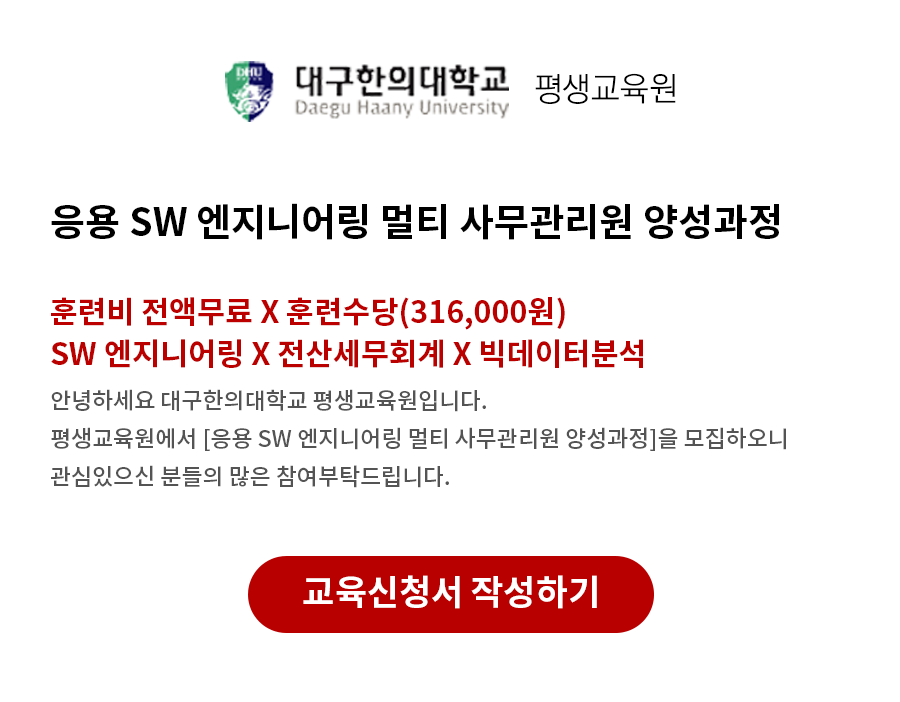
<style>
.page{position:relative;width:900px;height:702px;background:#ffffff}
.page>*{position:absolute;margin:0}
.t1{font:32.9px "KoPubWorldDotumPL";color:#000000}
.t2{font:38.1px "NotoSansCJKkr-Bold";color:#000000}
.t3{font:30.5px "NotoSansCJKkr-Bold";color:#bc0000}
.t4{font:30.5px "NotoSansCJKkr-Bold";color:#bb0000}
.t5{font:22.9px/38.1px "NotoSansCJKkr-Medium";color:#545454}
.t6{font:35px "NotoSansCJKkr-Bold";color:#ffffff}
</style>
<div class="page">
<p class="t1" style="left:535px;top:73px;width:141px;height:31px">평생교육원</p>
<p class="t2" style="left:51px;top:203px;width:728px;height:37px">응용 SW 엔지니어링 멀티 사무관리원 양성과정</p>
<p class="t3" style="left:51px;top:297px;width:514px;height:33px">훈련비 전액무료 X 훈련수당(316,000원)</p>
<p class="t4" style="left:51px;top:339px;width:592px;height:29px">SW 엔지니어링 X 전산세무회계 X 빅데이터분석</p>
<p class="t5" style="left:51px;top:389px;width:735px;height:99px">안녕하세요 대구한의대학교 평생교육원입니다.<br>평생교육원에서 [응용 SW 엔지니어링 멀티 사무관리원 양성과정]을 모집하오니 <br>관심있으신 분들의 많은 참여부탁드립니다.</p>
<p class="t6" style="left:303px;top:575px;width:294px;height:34px">교육신청서 작성하기</p>
</div>
